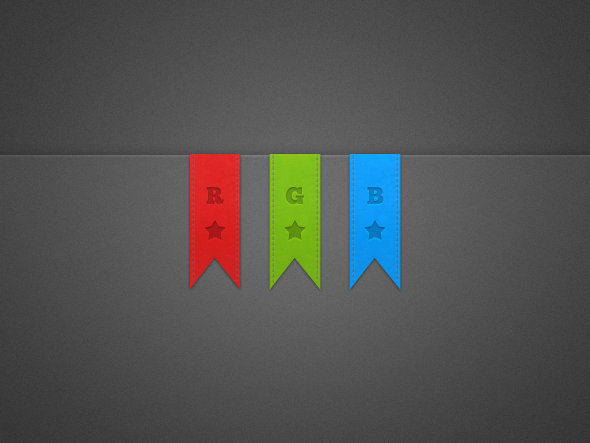
<style>
.page{position:relative;width:590px;height:443px}
.page>*{position:absolute;margin:0}
.t1{font:24px "ChunkFive-Roman";letter-spacing:-0.01em;color:#b11c1c}
.t2{font:24px "ChunkFive-Roman";letter-spacing:-0.01em;color:#649714}
.t3{font:24px "ChunkFive-Roman";letter-spacing:-0.01em;color:#0d7dc8}
</style>
<div class="page">
<p class="t1" style="left:206px;top:187px;width:18px;height:18px">R</p>
<p class="t2" style="left:285px;top:187px;width:19px;height:18px">G</p>
<p class="t3" style="left:367px;top:187px;width:17px;height:17px">B</p>
</div>
